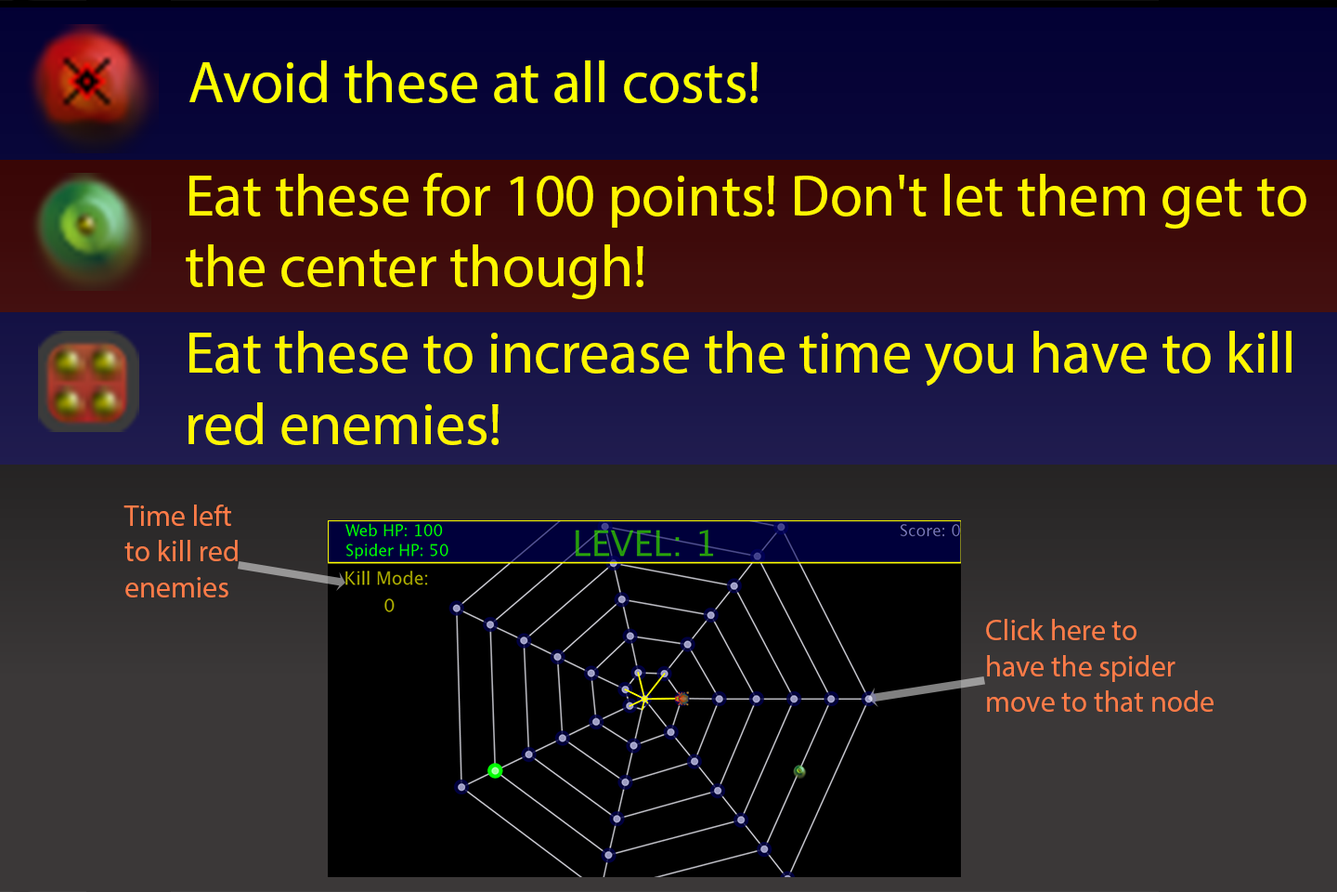
<style>
.page{position:relative;width:1337px;height:892px}
.page>*{position:absolute;margin:0}
.t1{font:59.4px "MyriadPro-Regular";color:#fcff00}
.t2{font:59.4px "MyriadPro-Regular";color:#fff600}
.t3{font:29.7px "MyriadPro-Regular";color:#ff7c48}
</style>
<div class="page">
<p class="t1" style="left:189px;top:60px;width:569px;height:43px">Avoid these at all costs!</p>
<p class="t2" style="left:186px;top:173px;width:1121px;height:126px">Eat these for 100 points! Don't let them get to<br>the center though!</p>
<p class="t2" style="left:189px;top:331px;width:1103px;height:114px">Eat these to increase the time you have to kill<br>red enemies!</p>
<p class="t3" style="left:124px;top:504px;width:114px;height:93px">Time left<br>to kill red<br>enemies</p>
<p class="t3" style="left:986px;top:619px;width:228px;height:92px">Click here to <br>have the spider <br>move to that node</p>
</div>
